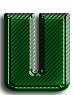
<style>
.page{position:relative;width:74px;height:95px}
.page>*{position:absolute;margin:0}
.t1{font:148.8px "Pricedown";font-weight:bold;scale:1.14 1}
</style>
<div class="page">
<p class="t1" style="left:4px;top:13px;width:66px;height:79px">U</p>
</div>
